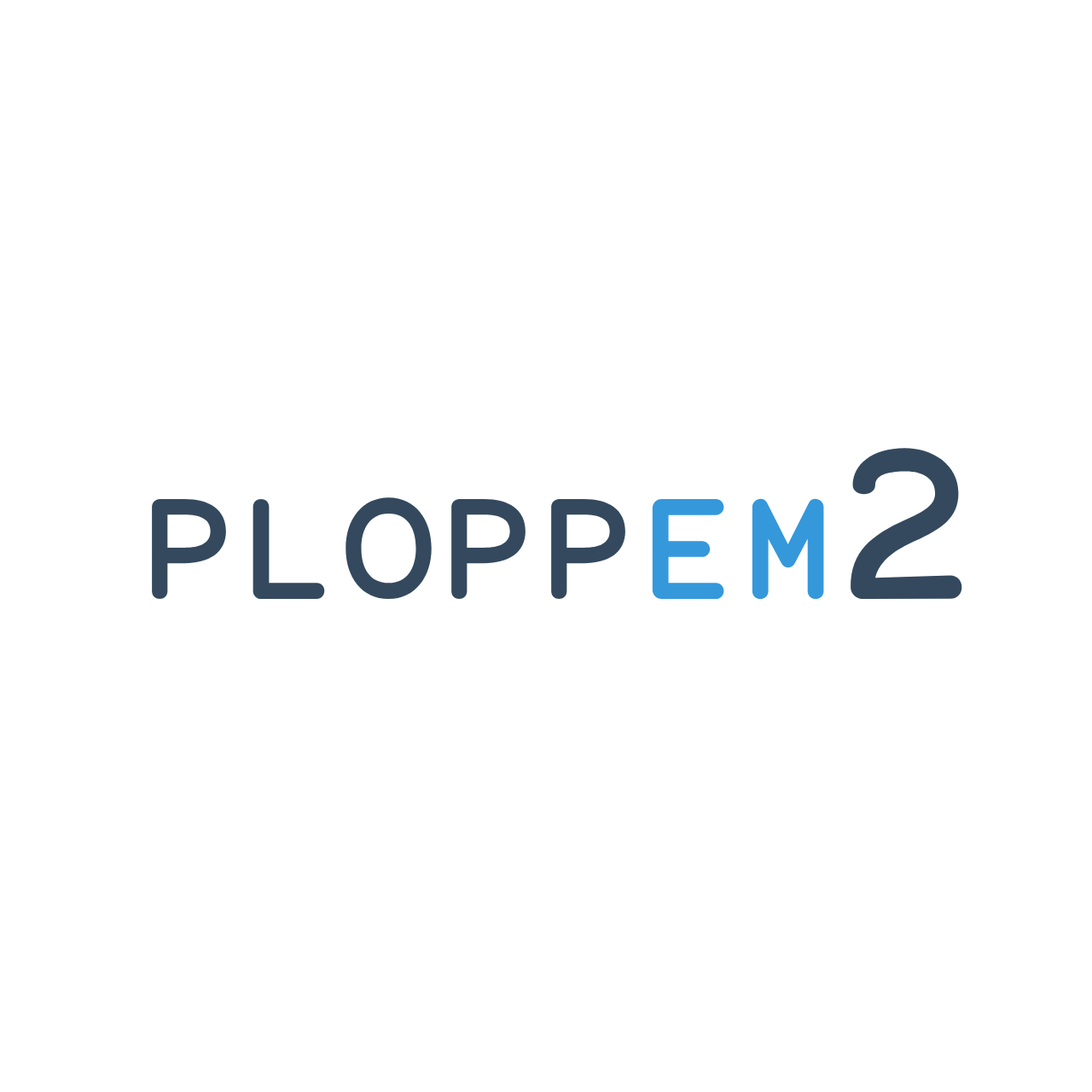
<style>
.page{position:relative;width:1092px;height:1092px;background:#ffffff}
.page>*{position:absolute;margin:0}
.t1{font:213.9px "AlmaMono-Bold";color:#34495e}
.t2{font:142.6px "AlmaMono-Bold"}
</style>
<div class="page">
<p class="t1" style="left:851px;top:448px;width:111px;height:151px">2</p>
<p class="t2" style="left:152px;top:497px;width:672px;height:102px">PLOPPEM</p>
</div>
